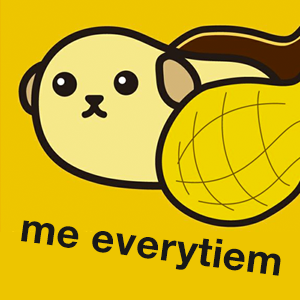
<style>
.page{position:relative;width:300px;height:300px;background:#edc500}
.page>*{position:absolute;margin:0}
.t1{font:40px "HelveticaNeue-Bold";letter-spacing:0.016em;color:#181818}
</style>
<div class="page">
<p class="t1" style="left:21px;top:220px;width:260px;height:56px;rotate:8deg">me everytiem</p>
</div>
